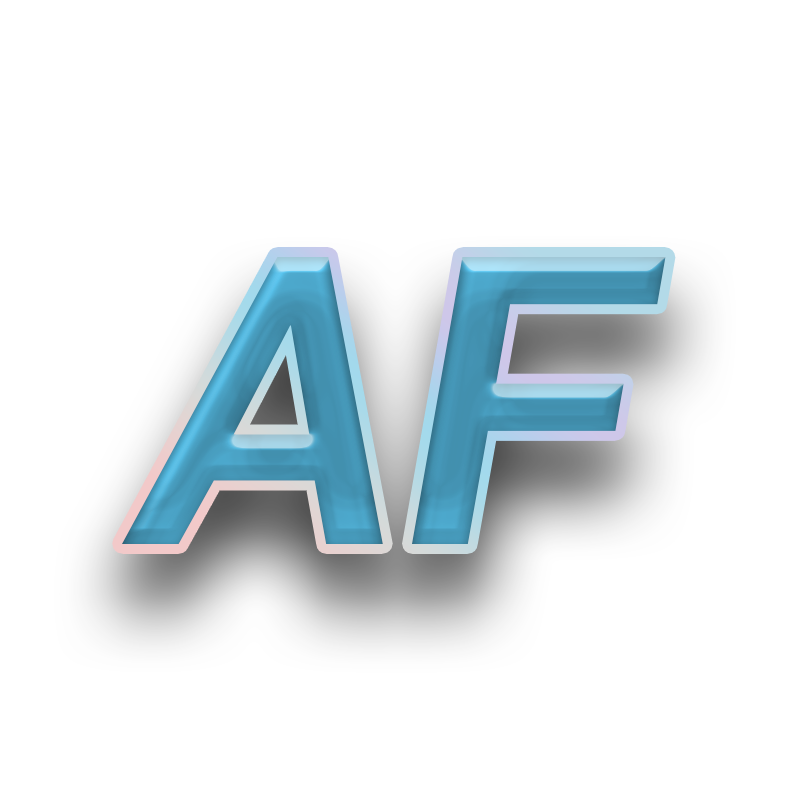
<style>
.page{position:relative;width:800px;height:800px;background:#ffffff}
.page>*{position:absolute;margin:0}
.t1{font:410px "ChakraPetch-BoldItalic";color:#4493b3}
</style>
<div class="page">
<p class="t1" style="left:122px;top:257px;width:544px;height:287px">AF</p>
</div>
